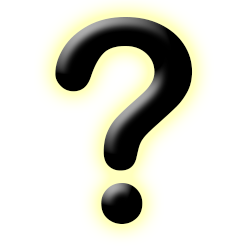
<style>
.page{position:relative;width:250px;height:250px;background:#ffffff}
.page>*{position:absolute;margin:0}
.t1{font:280px "ArialRoundedMTBold";color:#000000}
</style>
<div class="page">
<p class="t1" style="left:55px;top:17px;width:138px;height:207px">?</p>
</div>
